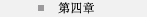
<style>
.page{position:relative;width:147px;height:17px;background:#f1f1f1}
.page>*{position:absolute;margin:0}
.t1{font:12px "SimSun";color:#000000;font-weight:bold}
</style>
<div class="page">
<p class="t1" style="left:38px;top:0px;width:77px;height:17px">第四章</p>
</div>
